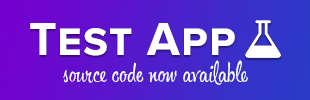
<style>
.page{position:relative;width:310px;height:100px}
.page>*{position:absolute;margin:0}
.t1{font:48px "ProximaNova-Bold";letter-spacing:0.025em;color:#ffffff;font-variant:small-caps}
.t2{font:24px "HipsterScriptPro";letter-spacing:0.025em;color:#ffffff}
</style>
<div class="page">
<p class="t1" style="left:30px;top:23px;width:205px;height:33px">Test App</p>
<p class="t2" style="left:63px;top:60px;width:185px;height:25px">source code now available</p>
</div>
